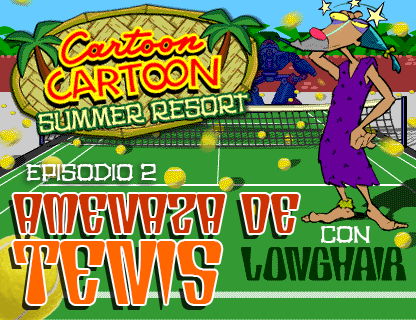
<style>
.page{position:relative;width:416px;height:320px;background:#339933}
.page>*{position:absolute;margin:0}
.t1{font:24.3px "TikiHut";color:#ffffff}
.t2{font:55.6px "TikiWood";letter-spacing:0.06em;color:#cc3300}
.t3{font:89.5px "TikiWood";letter-spacing:0.06em;color:#ff6600}
</style>
<div class="page">
<p class="t1" style="left:26px;top:163px;width:131px;height:18px">episodio 2</p>
<p class="t2" style="left:13px;top:194px;width:286px;height:39px">amenaza de</p>
<p class="t1" style="left:320px;top:226px;width:50px;height:17px">con</p>
<p class="t3" style="left:13px;top:241px;width:209px;height:63px">tenis</p>
</div>
